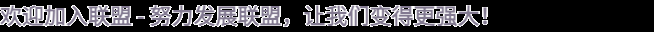
<style>
.page{position:relative;width:654px;height:32px;background:#000000}
.page>*{position:absolute;margin:0}
.t1{font:22px "WebPSD-18463539-0-Regular";color:#837a91;font-weight:bold}
</style>
<div class="page">
<p class="t1" style="left:0px;top:0px;width:654px;height:32px">欢迎加入联盟 - 努力发展联盟，让我们变得更强大！</p>
</div>
